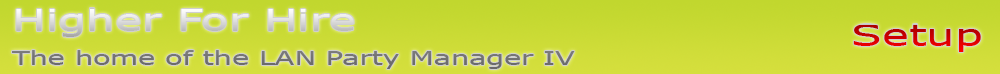
<style>
.page{position:relative;width:1000px;height:74px}
.page>*{position:absolute;margin:0}
.t1{font:19.5px "Verdana";scale:1.47 1}
.t2{font:30px "Verdana";scale:1.5 1}
</style>
<div class="page">
<p class="t1" style="left:12px;top:8px;width:563px;height:61px"><span class="t2">Higher For Hire<br></span><br>The home of the LAN Party Manager IV</p>
<p class="t2" style="left:853px;top:24px;width:128px;height:28px">Setup</p>
</div>
